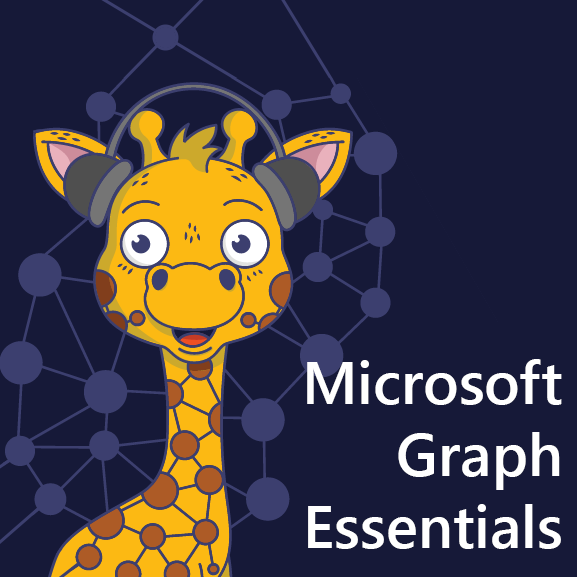
<style>
.page{position:relative;width:577px;height:577px;background:#161938}
.page>*{position:absolute;margin:0}
.t1{font:60px "SegoeUI-Semibold";color:#ffffff}
</style>
<div class="page">
<p class="t1" style="left:307px;top:359px;width:255px;height:190px;text-align:right">Microsoft<br>Graph<br>Essentials</p>
</div>
